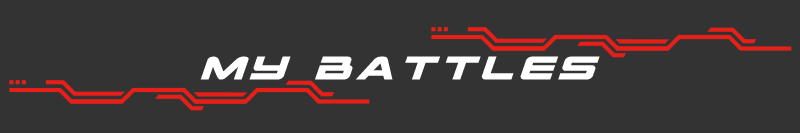
<style>
.page{position:relative;width:800px;height:133px;background:#333333}
.page>*{position:absolute;margin:0}
.t1{font:45.5px "SpaceRangerExpandedItalic";letter-spacing:0.1em;color:#ffffff}
</style>
<div class="page">
<p class="t1" style="left:200px;top:56px;width:400px;height:24px">My Battles</p>
</div>
